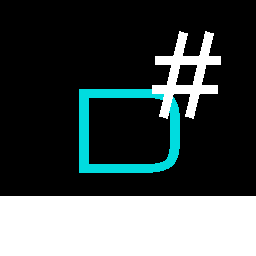
<style>
.page{position:relative;width:256px;height:256px;background:#000000}
.page>*{position:absolute;margin:0}
.t1{font:112px "Michroma";color:#ffffff}
.t2{font:112px "Michroma";color:#00dcdf}
</style>
<div class="page">
<p class="t1" style="left:152px;top:31px;width:69px;height:88px">#</p>
<p class="t2" style="left:79px;top:89px;width:101px;height:84px">D</p>
</div>
